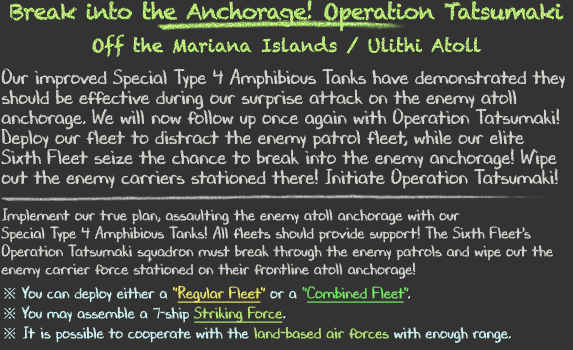
<style>
.page{position:relative;width:573px;height:350px;background:#333333}
.page>*{position:absolute;margin:0}
.t1{font:22px/36px "Chalkduster";letter-spacing:-0.04em}
.t2{font:18px/36px "Chalkduster"}
.t3{font:20px/20px "DJBChalkItUp";color:#d9ded6}
.t4{font:16px/18px "DJBChalkItUp";color:#d9ded6}
.t5{font:16px/24px "DJBChalkItUp";color:#d9ded6}
.t6{font:16px/20px "TimesNewRomanPSMT";color:#d7feff}
.t7{font:16px/18px "DJBChalkItUp";color:#d7feff}
.t8{font:16px/18px "DJBChalkItUp";color:#f5ed68}
.t9{font:16px/18px "DJBChalkItUp";color:#f5ed68;text-decoration:underline}
.t10{font:16px/18px "DJBChalkItUp";color:#7bf26b}
.t11{font:16px/18px "DJBChalkItUp";color:#7bf26b;text-decoration:underline}
.t12{font:16px/16px "TimesNewRomanPSMT";color:#d7feff}
.t13{font:16px/16px "DJBChalkItUp";color:#d7feff}
.t14{font:16px/20px "DJBChalkItUp";color:#bdef78;text-decoration:underline}
.t15{font:16px/20px "DJBChalkItUp";color:#d7feff}
.t16{font:16px/16px "DJBChalkItUp";color:#bdef78}
</style>
<div class="page">
<p class="t1" style="left:10px;top:0px;width:554px;height:57px;text-align:center">Break into the Anchorage! Operation Tatsumaki<br><span class="t2">Off the Mariana Islands / Ulithi Atoll</span></p>
<p class="t3" style="left:1px;top:68px;width:564px;height:275px">Our improved Special Type 4 Amphibious Tanks have demonstrated they<br>should be effective during our surprise attack on the enemy atoll<br>anchorage. We will now follow up once again with Operation Tatsumaki!<br>Deploy our fleet to distract the enemy patrol fleet, while our elite<br>Sixth Fleet seize the chance to break into the enemy anchorage! Wipe<br>out the enemy carriers stationed there! Initiate Operation Tatsumaki!<br><br><span class="t4">Implement our true plan, assaulting the enemy atoll anchorage with our<br>Special Type 4 Amphibious Tanks! All fleets should provide support! The Sixth Fleet's<br>Operation Tatsumaki squadron must break through the enemy patrols and wipe out the<br>enemy carrier force stationed on their frontline atoll anchorage</span><span class="t5">!<br></span><span class="t6">※ </span><span class="t7">You can deploy either a </span><span class="t8">"</span><span class="t9">Regular Fleet</span><span class="t8">"</span><span class="t7"> or a </span><span class="t10">"</span><span class="t11">Combined Fleet</span><span class="t10">"</span><span class="t7">.<br></span><span class="t12">※ </span><span class="t13">You may assemble a 7-ship </span><span class="t14">Striking Force</span><span class="t15">.<br></span><span class="t6">※ </span><span class="t13">It is possible to cooperate with the </span><span class="t16">land-based air forces</span><span class="t13"> with enough range.</span></p>
</div>
